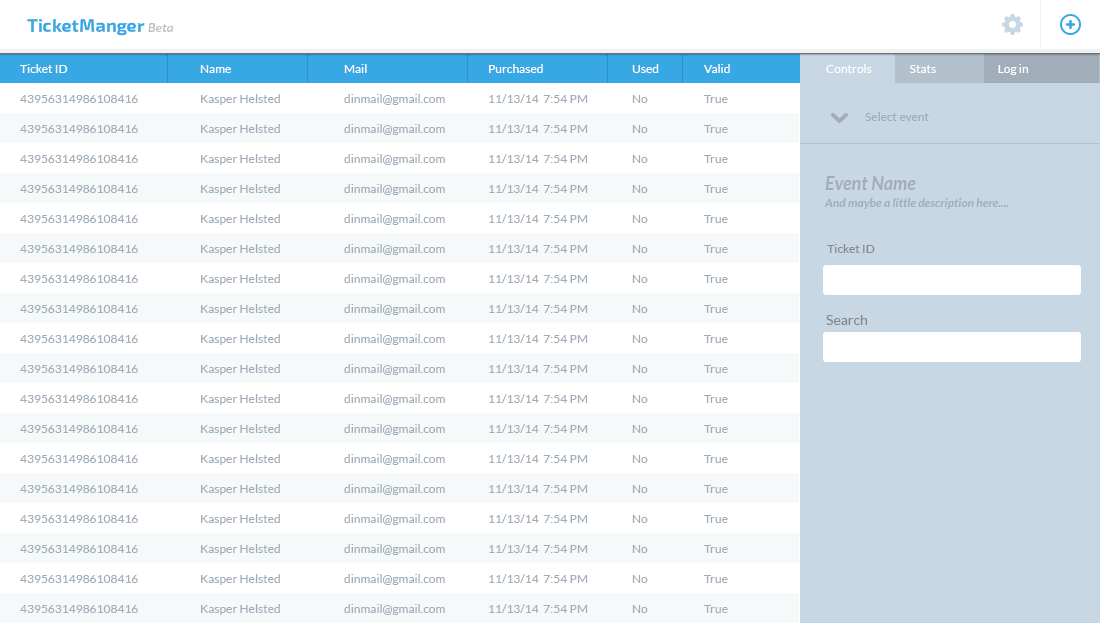
<style>
.page{position:relative;width:1100px;height:623px;background:#ffffff}
.page>*{position:absolute;margin:0}
.t1{font:18px "Exo2.0-Bold";color:#37a8e4}
.t2{font:12px "Exo2.0-Italic";color:#bbc0c4}
.t3{font:12px/30px "Lato-Regular";color:#a1adb8}
.t4{font:12px/30px "Lato-Regular";color:#ffffff}
.t5{font:12px "Lato-Regular";color:#ffffff}
.t6{font:12px "Lato-Regular";color:#a1adb8}
.t7{font:12px/17px "Lato-BoldItalic";color:#a1adb8}
.t8{font:18px/17px "Lato-BoldItalic";color:#a1adb8}
.t9{font:12px "Lato-Regular";color:#898989}
.t10{font:14px "Lato-Regular";color:#898989}
</style>
<div class="page">
<p class="t1" style="left:27px;top:19px;width:147px;height:17px">TicketManger <span class="t2">Beta</span></p>
<p class="t3" style="left:20px;top:64px;width:710px;height:551px"><span class="t4">Ticket ID    Name    Mail    Purchased   Used  Valid<br></span>43956314986108416  Kasper Helsted  dinmail@gmail.com  11/13/14  7:54 PM  No  True<br>43956314986108416  Kasper Helsted  dinmail@gmail.com  11/13/14  7:54 PM  No  True<br>43956314986108416  Kasper Helsted  dinmail@gmail.com  11/13/14  7:54 PM  No  True<br>43956314986108416  Kasper Helsted  dinmail@gmail.com  11/13/14  7:54 PM  No  True<br>43956314986108416  Kasper Helsted  dinmail@gmail.com  11/13/14  7:54 PM  No  True<br>43956314986108416  Kasper Helsted  dinmail@gmail.com  11/13/14  7:54 PM  No  True<br>43956314986108416  Kasper Helsted  dinmail@gmail.com  11/13/14  7:54 PM  No  True<br>43956314986108416  Kasper Helsted  dinmail@gmail.com  11/13/14  7:54 PM  No  True<br>43956314986108416  Kasper Helsted  dinmail@gmail.com  11/13/14  7:54 PM  No  True<br>43956314986108416  Kasper Helsted  dinmail@gmail.com  11/13/14  7:54 PM  No  True<br>43956314986108416  Kasper Helsted  dinmail@gmail.com  11/13/14  7:54 PM  No  True<br>43956314986108416  Kasper Helsted  dinmail@gmail.com  11/13/14  7:54 PM  No  True<br>43956314986108416  Kasper Helsted  dinmail@gmail.com  11/13/14  7:54 PM  No  True<br>43956314986108416  Kasper Helsted  dinmail@gmail.com  11/13/14  7:54 PM  No  True<br>43956314986108416  Kasper Helsted  dinmail@gmail.com  11/13/14  7:54 PM  No  True<br>43956314986108416  Kasper Helsted  dinmail@gmail.com  11/13/14  7:54 PM  No  True<br>43956314986108416  Kasper Helsted  dinmail@gmail.com  11/13/14  7:54 PM  No  True<br>43956314986108416  Kasper Helsted  dinmail@gmail.com  11/13/14  7:54 PM  No  True</p>
<p class="t5" style="left:826px;top:64px;width:203px;height:11px">Controls      Stats             Log in</p>
<p class="t6" style="left:865px;top:112px;width:64px;height:9px">Select event</p>
<p class="t7" style="left:824px;top:176px;width:185px;height:33px"><span class="t8">Event Name<br></span>And maybe a little description here....</p>
<p class="t9" style="left:827px;top:244px;width:48px;height:9px">Ticket ID</p>
<p class="t10" style="left:826px;top:315px;width:41px;height:10px">Search</p>
</div>
